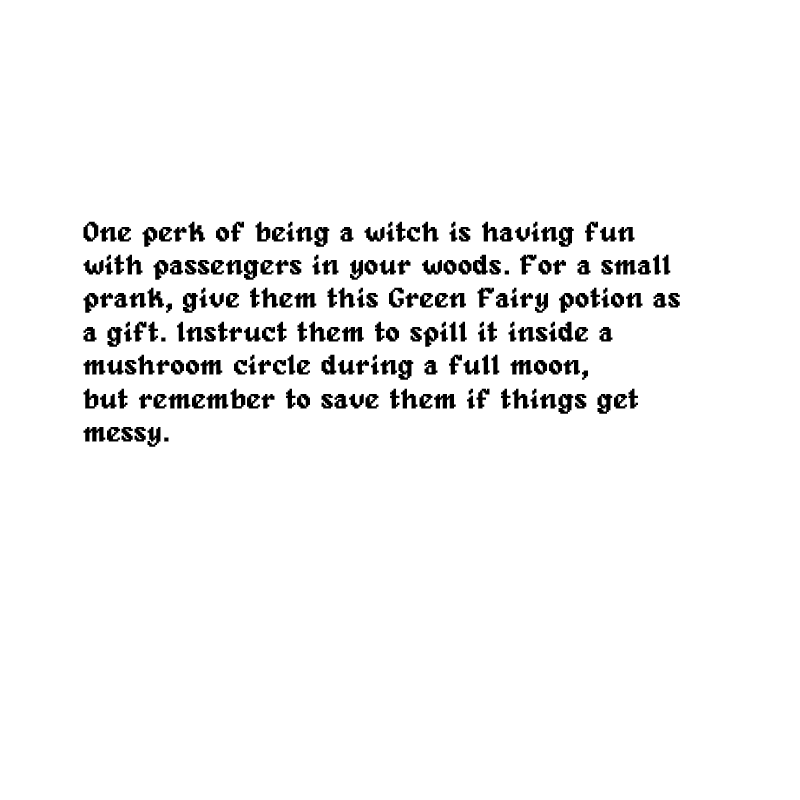
<style>
.page{position:relative;width:800px;height:800px;background:#ffffff}
.page>*{position:absolute;margin:0}
.t1{font:27.9px "Alagard";color:#000000;font-weight:bold}
</style>
<div class="page">
<p class="t1" style="left:83px;top:221px;width:597px;height:226px">One perk of being a witch is having fun <br>with passengers in your woods. For a small <br>prank, give them this Green Fairy potion as<br>a gift. Instruct them to spill it inside a <br>mushroom circle during a full moon, <br>but remember to save them if things get <br>messy.</p>
</div>
